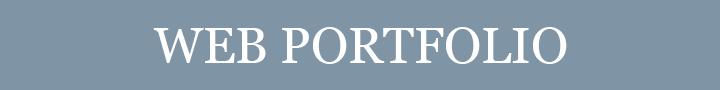
<style>
.page{position:relative;width:720px;height:90px;background:#7f95a6}
.page>*{position:absolute;margin:0}
.t1{font:12px/38.2px "Georgia";color:#ffffff}
</style>
<div class="page">
<p class="t1" style="left:153px;top:27px;width:414px;height:37px">WEB PORTFOLIO</p>
</div>
